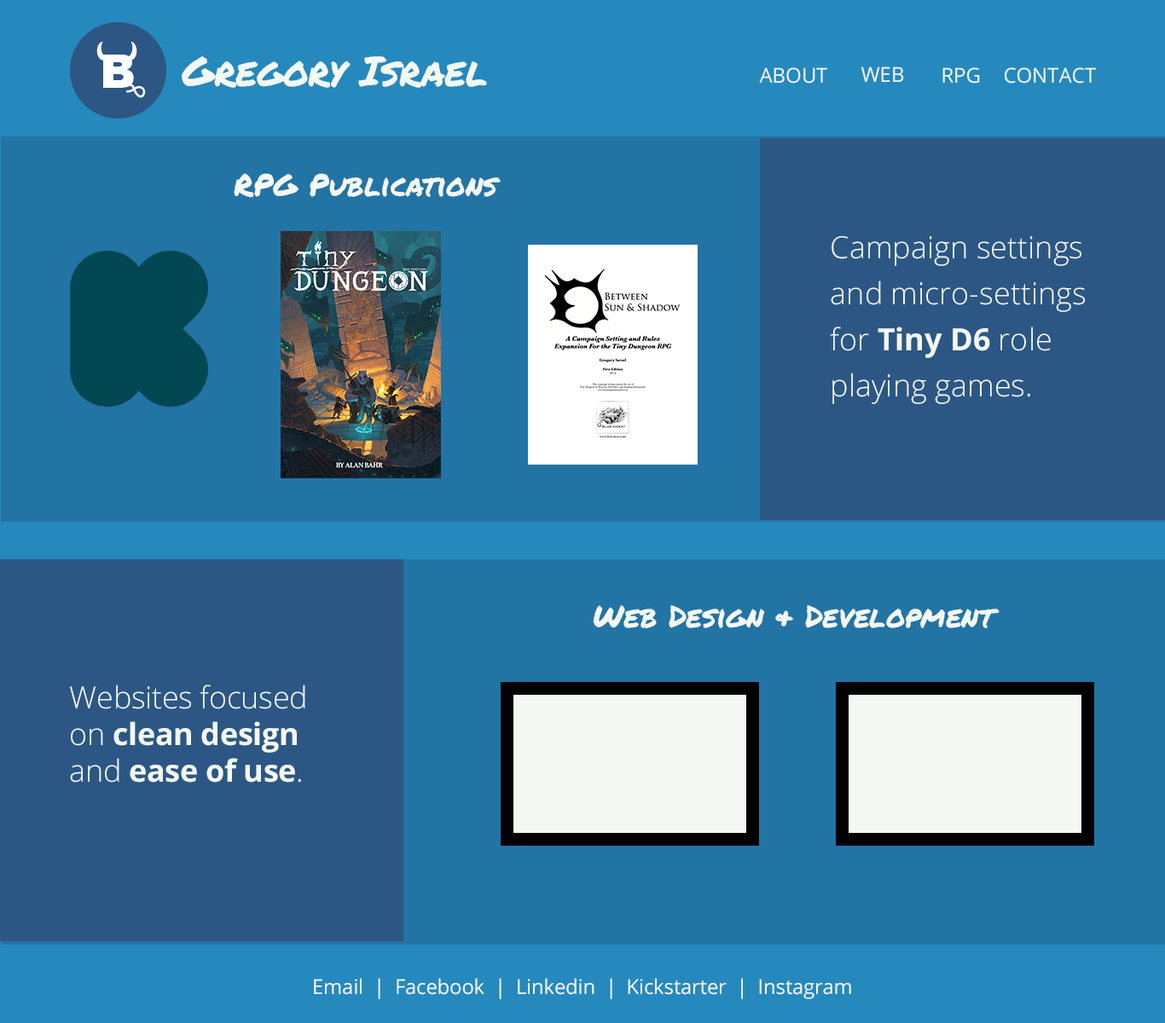
<style>
.page{position:relative;width:1165px;height:1023px;background:#2274a5}
.page>*{position:absolute;margin:0}
.t1{font:40.9px "PermanentMarker-Regular";letter-spacing:-0.01em;color:#f3f8f2}
.t2{font:20.5px "OpenSans-Regular";color:#f3f8f2}
.t3{font:30.7px "PermanentMarker-Regular";color:#f3f8f2}
.t4{font:30.7px/46.1px "OpenSans-Light";color:#f3f8f2}
.t5{font:30.7px/46.1px "OpenSans-Bold";color:#f3f8f2}
.t6{font:30.7px "OpenSans-Light";letter-spacing:-0.01em;color:#f3f8f2}
.t7{font:30.7px "OpenSans-Bold";letter-spacing:-0.01em;color:#f3f8f2}
.t8{font:20.5px "OpenSans-Regular";letter-spacing:-0.01em;color:#f3f8f2}
</style>
<div class="page">
<p class="t1" style="left:182px;top:56px;width:305px;height:32px">Gregory Israel</p>
<p class="t2" style="left:759px;top:67px;width:68px;height:17px">ABOUT</p>
<p class="t2" style="left:861px;top:67px;width:43px;height:15px">WEB</p>
<p class="t2" style="left:942px;top:67px;width:38px;height:17px">RPG</p>
<p class="t2" style="left:1005px;top:67px;width:91px;height:17px">CONTACT</p>
<p class="t3" style="left:234px;top:173px;width:267px;height:25px">RPG Publications</p>
<p class="t4" style="left:830px;top:236px;width:255px;height:168px">Campaign settings and micro-settings for <span class="t5">Tiny D6</span> role playing games.</p>
<p class="t3" style="left:593px;top:605px;width:407px;height:24px">Web Design &amp; Development</p>
<p class="t6" style="left:70px;top:685px;width:235px;height:98px">Websites focused on <span class="t7">clean design</span> and <span class="t7">ease of use</span>.</p>
<p class="t8" style="left:314px;top:978px;width:537px;height:22px">Email  |  Facebook  |  Linkedin  |  Kickstarter  |  Instagram</p>
</div>
